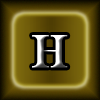
<style>
.page{position:relative;width:100px;height:100px}
.page>*{position:absolute;margin:0}
.t1{font:47px "EngraversMT";font-weight:bold;scale:0.77 1}
</style>
<div class="page">
<p class="t1" style="left:32px;top:35px;width:36px;height:33px">H</p>
</div>
